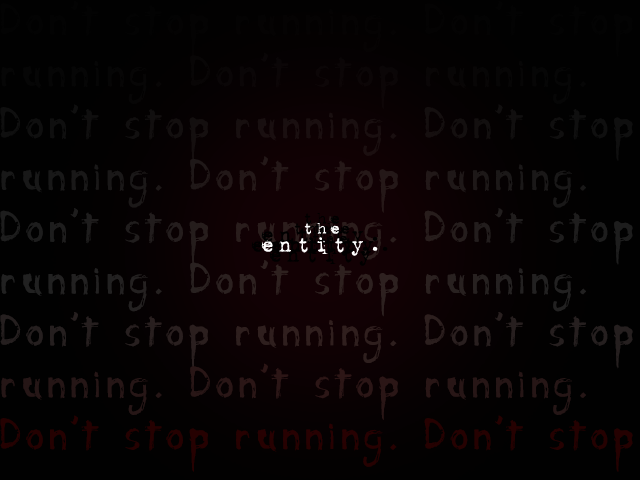
<style>
.page{position:relative;width:640px;height:480px;background:#010101}
.page>*{position:absolute;margin:0}
.t1{font:43.2px "Anarchy";letter-spacing:0.1em;color:#121212;scale:0.83 1}
.t2{font:43.2px "Anarchy";letter-spacing:0.1em;color:#242424;scale:0.83 1}
.t3{font:43.2px "Anarchy";letter-spacing:0.1em;color:#656565;scale:0.83 1}
.t4{font:43.2px "Anarchy";letter-spacing:0.1em;color:#a2a2a2;scale:0.83 1}
.t5{font:43.2px "Anarchy";letter-spacing:0.1em;color:#cacaca;scale:0.83 1}
.t6{font:43.2px "Anarchy";letter-spacing:0.1em;color:#e5e5e5;scale:0.83 1}
.t7{font:43.2px "Anarchy";letter-spacing:0.1em;color:#ffd3d3;scale:0.83 1}
.t8{font:43.2px "Anarchy";letter-spacing:0.1em;color:#ff9393;scale:0.83 1}
.t9{font:43.2px "Anarchy";letter-spacing:0.1em;color:#ff0000;scale:0.83 1}
.t10{font:43.2px "Anarchy";letter-spacing:0.1em;color:#ffffff;scale:0.83 1}
</style>
<div class="page">
<p class="t1" style="left:0px;top:1px;width:633px;height:471px">Don't stop running. Don't stop <span class="t2">running. Don't stop running. </span><span class="t3">Don't stop running. Don't stop </span><span class="t4">running. Don't stop running. </span><span class="t5">Don't stop running. Don't stop </span><span class="t6">running. Don't stop running. </span><span class="t7">Don't stop running. Don't stop </span><span class="t8">running. Don't stop running. </span><span class="t9">Don't stop running. Don't stop </span><span class="t10">running.</span></p>
</div>
